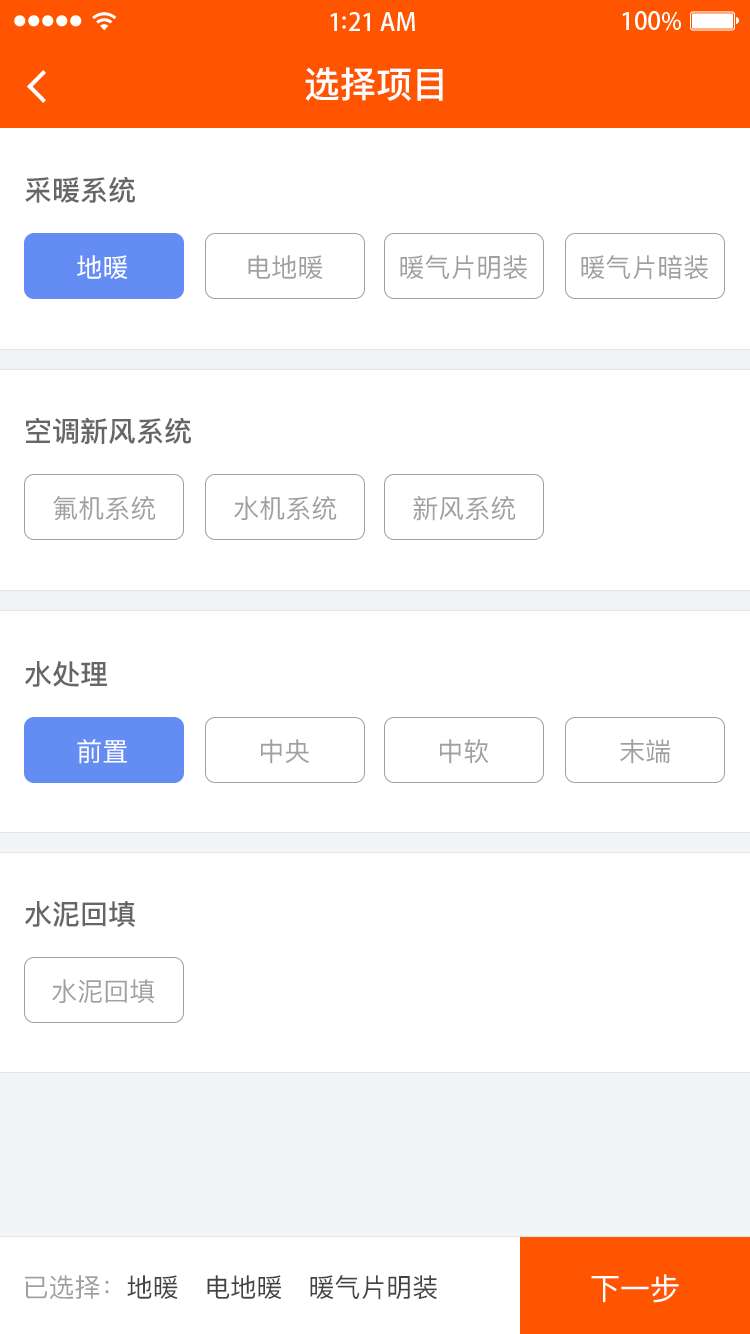
<style>
.page{position:relative;width:750px;height:1334px;background:#ffffff}
.page>*{position:absolute;margin:0}
.t1{font:36px "PingFangSC-Medium";color:#ffffff}
.t2{font:28px "PingFangSC-Medium";color:#666666}
.t3{font:26px "PingFangSC-Regular";color:#ffffff;text-transform:uppercase}
.t4{font:26px "PingFangSC-Regular";color:#a0a0a0;text-transform:uppercase}
.t5{font:26px "PingFangSC-Regular";color:#434343;text-transform:uppercase}
.t6{font:30px "PingFangSC-Regular";color:#ffffff}
</style>
<div class="page">
<p class="t1" style="left:305px;top:67px;width:138px;height:34px">选择项目</p>
<p class="t2" style="left:25px;top:176px;width:110px;height:27px">采暖系统</p>
<p class="t3" style="left:77px;top:255px;width:51px;height:24px">地暖</p>
<p class="t4" style="left:248px;top:255px;width:75px;height:24px">电地暖</p>
<p class="t4" style="left:400px;top:255px;width:127px;height:25px">暖气片明装</p>
<p class="t4" style="left:581px;top:255px;width:127px;height:25px">暖气片暗装</p>
<p class="t2" style="left:26px;top:417px;width:165px;height:27px">空调新风系统</p>
<p class="t4" style="left:53px;top:496px;width:103px;height:25px">氟机系统</p>
<p class="t4" style="left:234px;top:496px;width:103px;height:25px">水机系统</p>
<p class="t4" style="left:413px;top:496px;width:103px;height:25px">新风系统</p>
<p class="t2" style="left:25px;top:661px;width:82px;height:26px">水处理</p>
<p class="t3" style="left:77px;top:739px;width:50px;height:25px">前置</p>
<p class="t4" style="left:261px;top:739px;width:48px;height:25px">中央</p>
<p class="t4" style="left:440px;top:739px;width:49px;height:25px">中软</p>
<p class="t4" style="left:620px;top:739px;width:50px;height:25px">末端</p>
<p class="t2" style="left:25px;top:901px;width:110px;height:26px">水泥回填</p>
<p class="t4" style="left:52px;top:979px;width:103px;height:25px">水泥回填</p>
<p class="t5" style="left:25px;top:1275px;width:412px;height:25px"><span class="t4">已选择：</span>地暖   电地暖   暖气片明装</p>
<p class="t6" style="left:591px;top:1274px;width:88px;height:29px">下一步</p>
</div>
